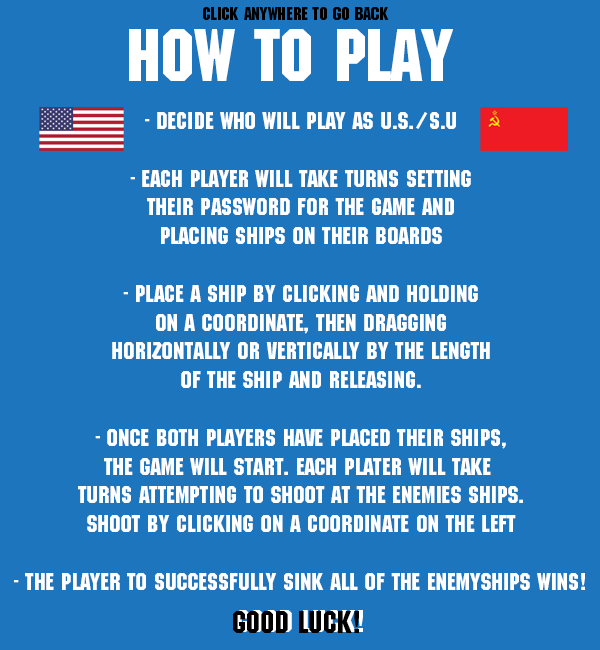
<style>
.page{position:relative;width:600px;height:650px;background:#1d75bd}
.page>*{position:absolute;margin:0}
.t1{font:18px "MachineStd";color:#000000}
.t2{font:72px "MachineStd";color:#ffffff}
.t3{font:24px "MachineStd";color:#ffffff}
.t4{font:30px "MachineStd";color:#000000}
.t5{font:30px "MachineStd"}
</style>
<div class="page">
<p class="t1" style="left:203px;top:7px;width:186px;height:13px">click anywhere to go back</p>
<p class="t2" style="left:129px;top:29px;width:324px;height:52px">How to Play</p>
<p class="t3" style="left:14px;top:112px;width:571px;height:478px;text-align:center">- Decide who will play as u.s./s.u<br><br>- Each player will take turns setting<br>their password for the game and<br>placing ships on their boards<br><br>- Place a ship by clicking and holding<br>on a coordinate, then dragging<br>horizontally or vertically by the length<br>of the ship and releasing.<br><br>- ONce both players have placed their ships,<br>the game will start. Each plater will take <br>turns attempting to shoot at the enemies ships.<br>Shoot by clicking on a coordinate on the left<br><br>- The player to successfully sink all of the enemyships wins!</p>
<p class="t4" style="left:233px;top:611px;width:126px;height:22px">GOOD LUCK!</p>
<p class="t5" style="left:237px;top:610px;width:126px;height:22px">GOOD LUCK!</p>
</div>
